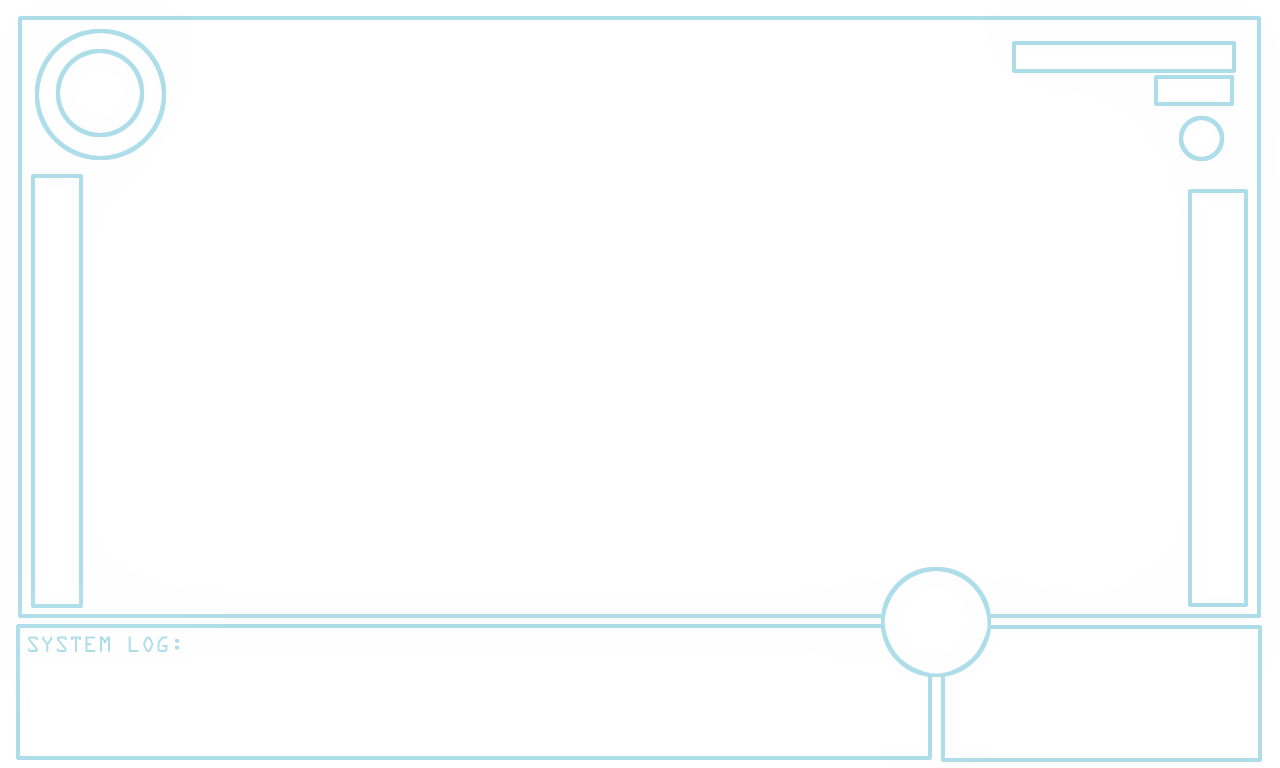
<style>
.page{position:relative;width:1280px;height:768px;background:#ffffff}
.page>*{position:absolute;margin:0}
.t1{font:20px "OCRAStd";color:#aeddea}
</style>
<div class="page">
<p class="t1" style="left:28px;top:636px;width:151px;height:16px">SYSTEM LOG:</p>
</div>
